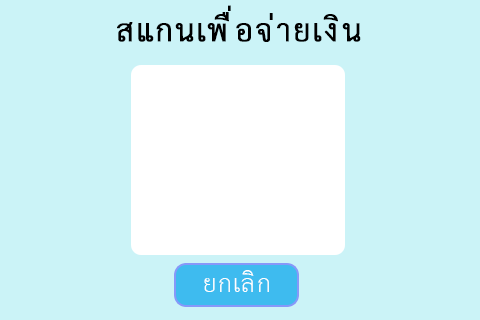
<style>
.page{position:relative;width:480px;height:320px;background:#cbf3f7}
.page>*{position:absolute;margin:0}
.t1{font:44.7px "THSarabunPSK";letter-spacing:0.03em;color:#000000;font-weight:bold}
.t2{font:35.6px "THSarabunPSK";letter-spacing:0.03em;color:#ffffff}
</style>
<div class="page">
<p class="t1" style="left:117px;top:5px;width:244px;height:37px">สแกนเพื่อจ่ายเงิน</p>
<p class="t2" style="left:204px;top:270px;width:65px;height:22px">ยกเลิก</p>
</div>
